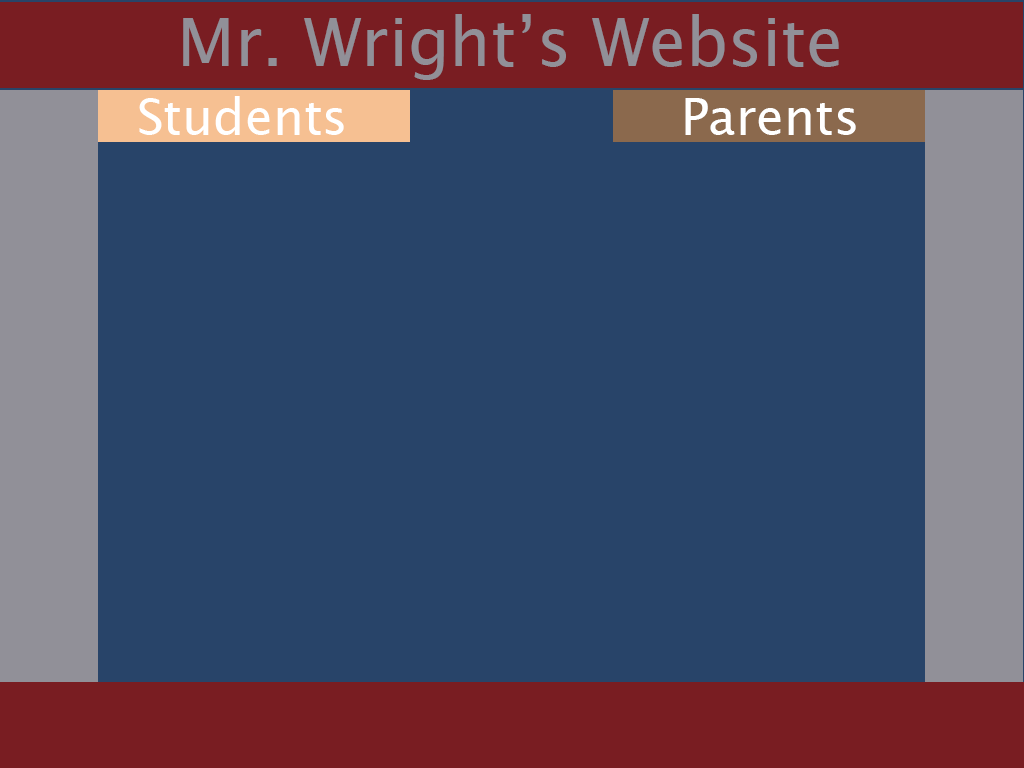
<style>
.page{position:relative;width:1024px;height:768px;background:#284469}
.page>*{position:absolute;margin:0}
.t1{font:66.7px "LucidaGrande";color:#919098}
.t2{font:50px "LucidaGrande";color:#ffffff}
</style>
<div class="page">
<p class="t1" style="left:183px;top:14px;width:656px;height:66px">Mr. Wright’s Website</p>
<p class="t2" style="left:139px;top:96px;width:205px;height:39px">Students</p>
<p class="t2" style="left:685px;top:98px;width:171px;height:37px">Parents</p>
</div>
